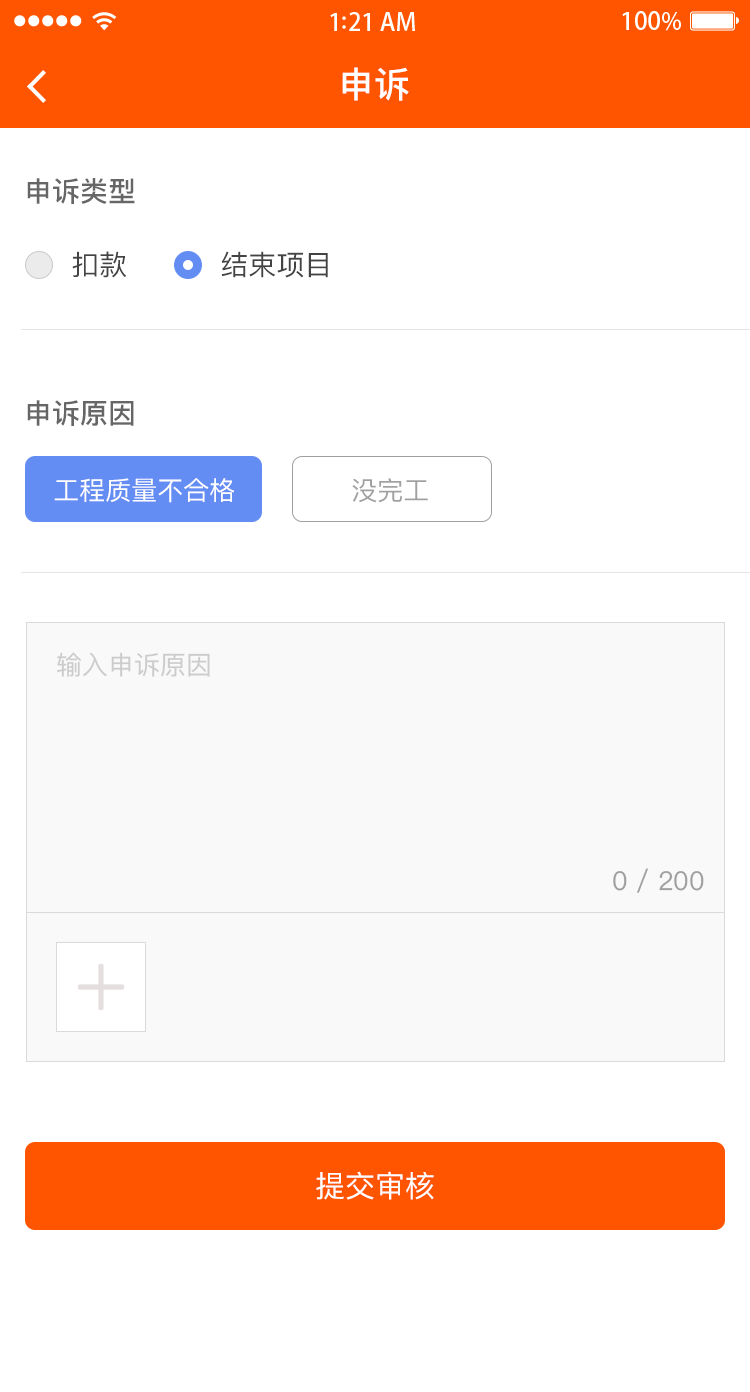
<style>
.page{position:relative;width:750px;height:1392px;background:#ffffff}
.page>*{position:absolute;margin:0}
.t1{font:36px "PingFangSC-Medium";color:#ffffff}
.t2{font:28px "PingFangSC-Medium";color:#666666}
.t3{font:28px "PingFangSC-Regular";color:#434343;text-transform:uppercase}
.t4{font:26px "PingFangSC-Regular";color:#ffffff;text-transform:uppercase}
.t5{font:26px "PingFangSC-Regular";color:#a0a0a0;text-transform:uppercase}
.t6{font:26px "PingFangSC-Regular";color:#cccccc}
.t7{font:26px "PingFangSC-Regular";color:#a0a0a0}
.t8{font:30px "PingFangSC-Regular";color:#ffffff;text-transform:uppercase}
</style>
<div class="page">
<p class="t1" style="left:342px;top:67px;width:67px;height:34px">申诉</p>
<p class="t2" style="left:27px;top:178px;width:108px;height:26px">申诉类型</p>
<p class="t3" style="left:72px;top:251px;width:55px;height:27px">扣款</p>
<p class="t3" style="left:221px;top:251px;width:107px;height:27px">结束项目</p>
<p class="t2" style="left:27px;top:400px;width:107px;height:26px">申诉原因</p>
<p class="t4" style="left:54px;top:478px;width:181px;height:25px">工程质量不合格</p>
<p class="t5" style="left:352px;top:478px;width:76px;height:25px">没完工</p>
<p class="t6" style="left:57px;top:652px;width:153px;height:25px">输入申诉原因</p>
<p class="t7" style="left:613px;top:868px;width:91px;height:25px">0 / 200</p>
<p class="t8" style="left:316px;top:1171px;width:118px;height:29px">提交审核</p>
</div>
